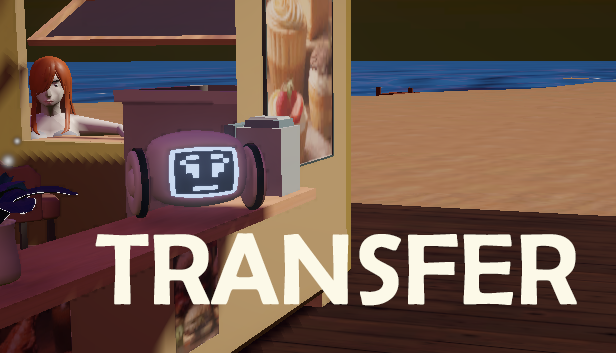
<style>
.page{position:relative;width:616px;height:353px}
.page>*{position:absolute;margin:0}
.t1{font:100px "BerlinSansFB-Reg";color:#fcf9e8;font-weight:bold}
</style>
<div class="page">
<p class="t1" style="left:95px;top:233px;width:482px;height:73px">TRANSFER</p>
</div>
